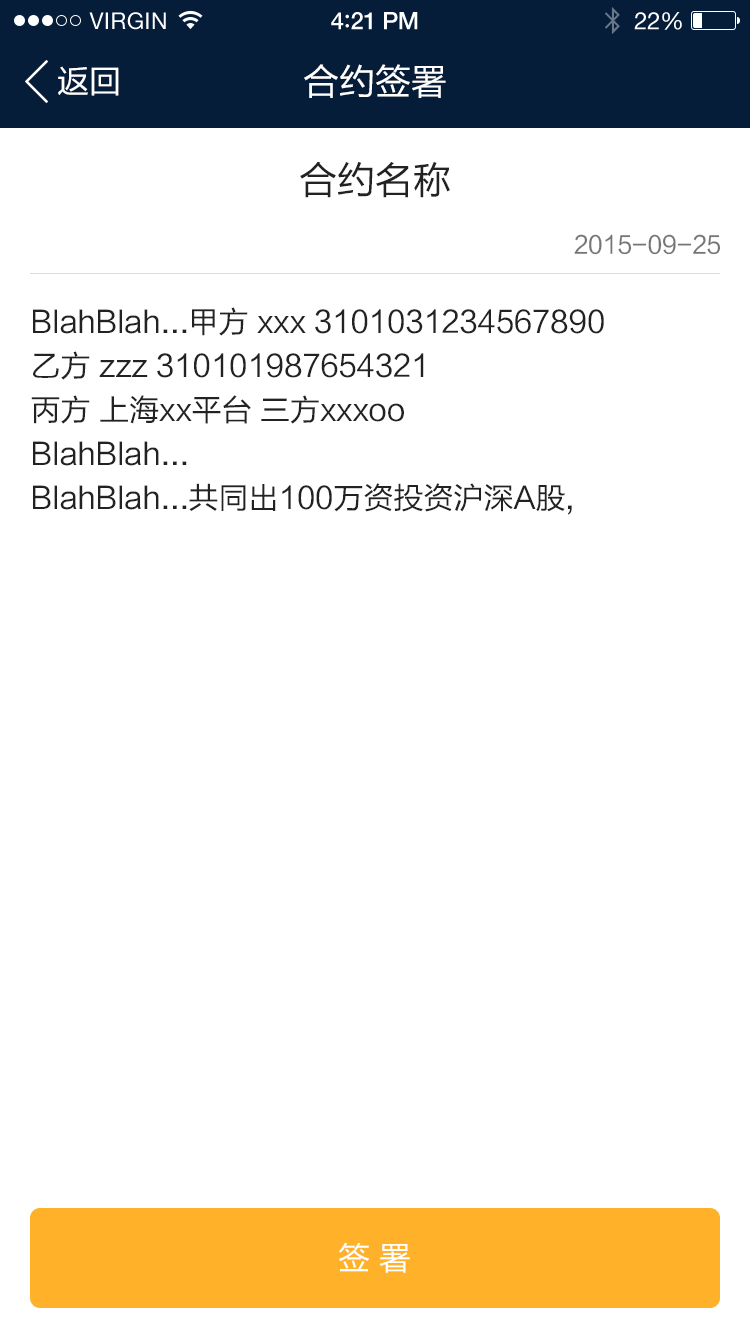
<style>
.page{position:relative;width:750px;height:1334px;background:#ffffff}
.page>*{position:absolute;margin:0}
.t1{font:36px "FZLTHK--GBK1-0";color:#ffffff}
.t2{font:32px "FZLTHK--GBK1-0";color:#ffffff}
.t3{font:38px "FZLTHK--GBK1-0";color:#222222}
.t4{font:24px "FZLTHK--GBK1-0";color:#757575}
.t5{font:30px/44px "FZLTHK--GBK1-0";color:#222222}
</style>
<div class="page">
<p class="t1" style="left:304px;top:64px;width:142px;height:34px">合约签署</p>
<p class="t2" style="left:58px;top:66px;width:61px;height:30px">返回</p>
<p class="t3" style="left:300px;top:162px;width:150px;height:36px">合约名称</p>
<p class="t4" style="left:574px;top:234px;width:147px;height:21px">2015-09-25</p>
<p class="t5" style="left:31px;top:307px;width:573px;height:208px">BlahBlah...甲方 xxx 3101031234567890<br>乙方 zzz 310101987654321<br>丙方 上海xx平台 三方xxxoo<br>BlahBlah...<br>BlahBlah...共同出100万资投资沪深A股,</p>
<p class="t2" style="left:338px;top:1242px;width:72px;height:31px">签 署</p>
</div>
